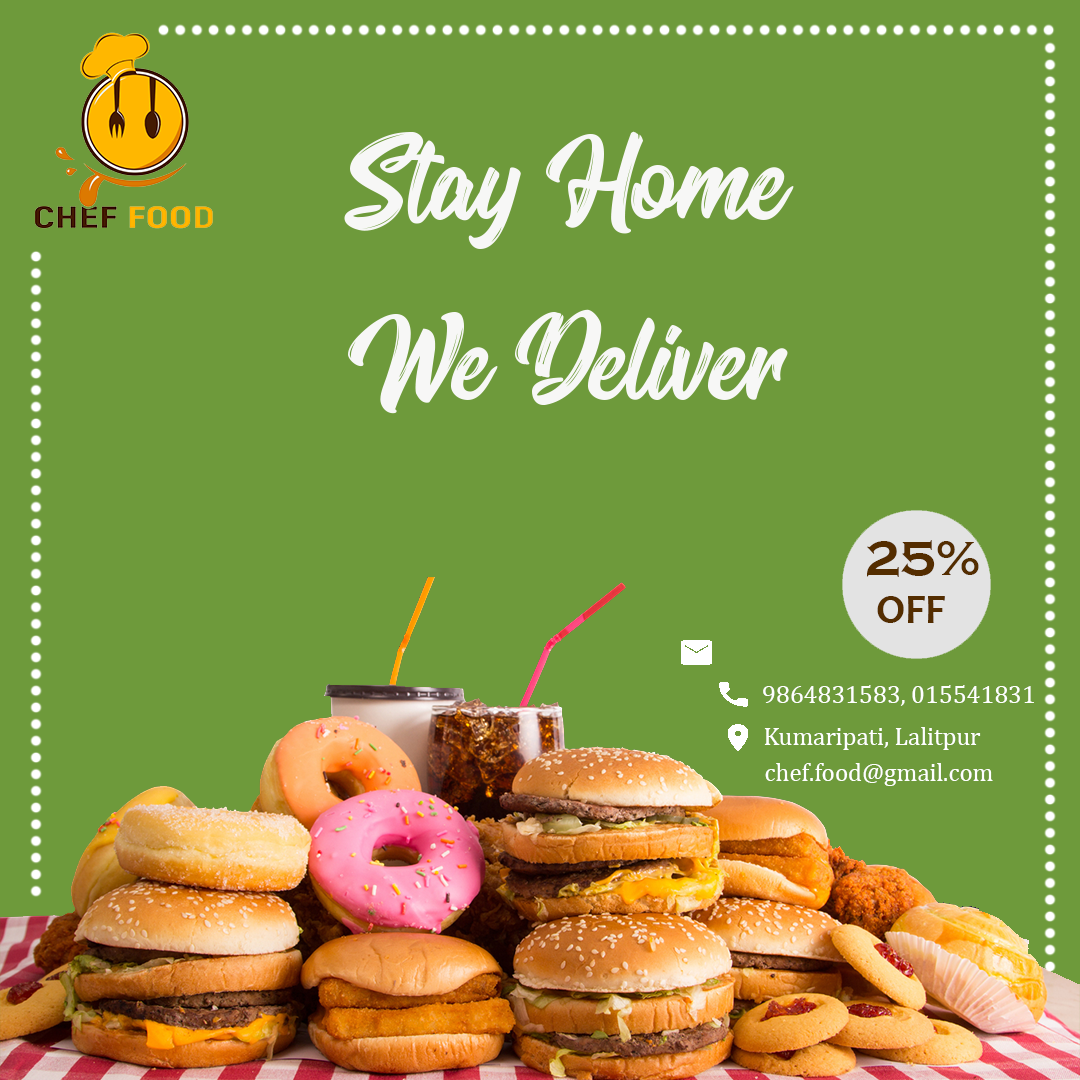
<style>
.page{position:relative;width:1080px;height:1080px;background:#6e9a3b}
.page>*{position:absolute;margin:0}
.t1{font:50px "CopperplateGothic-Bold";color:#542d00}
.t2{font:41.7px "Candara-Bold";color:#542d00}
.t3{font:25px "CambriaMath";color:#ffffff}
</style>
<div class="page">
<p class="t1" style="left:867px;top:540px;width:112px;height:37px">25%</p>
<p class="t2" style="left:877px;top:596px;width:68px;height:27px">OFF</p>
<p class="t3" style="left:763px;top:685px;width:271px;height:21px">9864831583, 015541831</p>
<p class="t3" style="left:764px;top:727px;width:217px;height:23px">Kumaripati, Lalitpur</p>
<p class="t3" style="left:765px;top:763px;width:228px;height:23px">chef.food@gmail.com</p>
</div>
